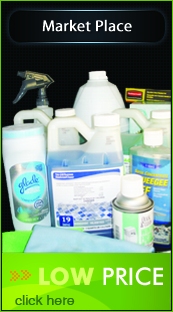
<style>
.page{position:relative;width:173px;height:312px}
.page>*{position:absolute;margin:0}
.t1{font:16px "MyriadPro-Regular";color:#ffffff;font-weight:bold}
.t2{font:24px "FuturaBT-Medium";color:#ffffff}
.t3{font:24px "FuturaBT-Bold";color:#deef84}
.t4{font:14px "Helios";color:#3f661f}
</style>
<div class="page">
<p class="t1" style="left:42px;top:19px;width:90px;height:13px">Market Place</p>
<p class="t2" style="left:39px;top:267px;width:124px;height:19px"><span class="t3">LOW </span>PRICE</p>
<p class="t4" style="left:15px;top:295px;width:60px;height:10px">click here</p>
</div>
